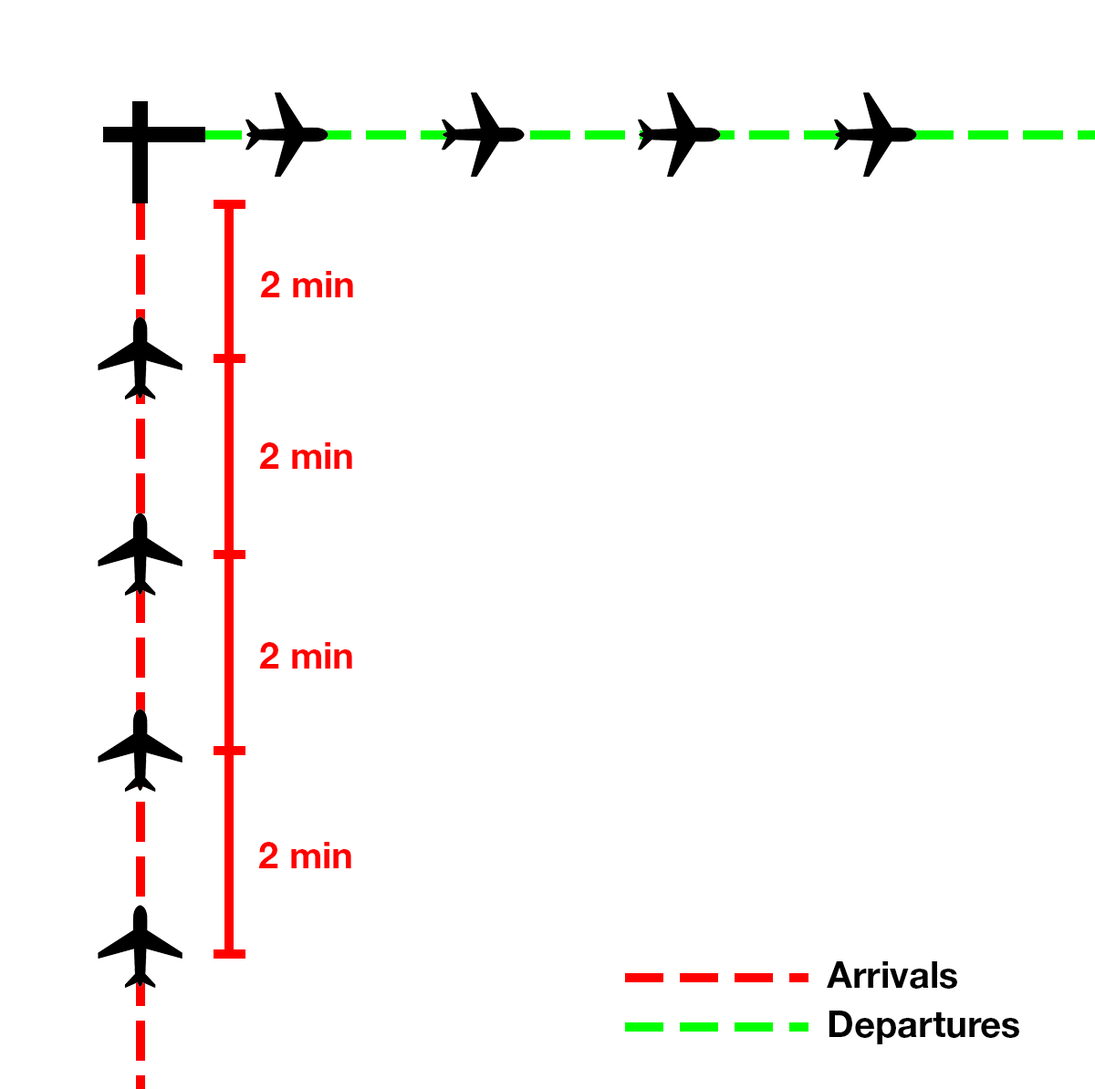
<style>
.page{position:relative;width:1095px;height:1089px;background:#ffffff}
.page>*{position:absolute;margin:0}
.t1{font:36.5px "HelveticaNeueLTStd-Bd";color:#ff0000}
.t2{font:36.5px "HelveticaNeueLTStd-Bd";color:#000000}
</style>
<div class="page">
<p class="t1" style="left:261px;top:271px;width:92px;height:26px">2 min</p>
<p class="t1" style="left:260px;top:442px;width:92px;height:27px">2 min</p>
<p class="t1" style="left:260px;top:642px;width:92px;height:27px">2 min</p>
<p class="t1" style="left:259px;top:842px;width:92px;height:26px">2 min</p>
<p class="t2" style="left:827px;top:962px;width:130px;height:27px">Arrivals</p>
<p class="t2" style="left:828px;top:1011px;width:191px;height:34px">Departures</p>
</div>
